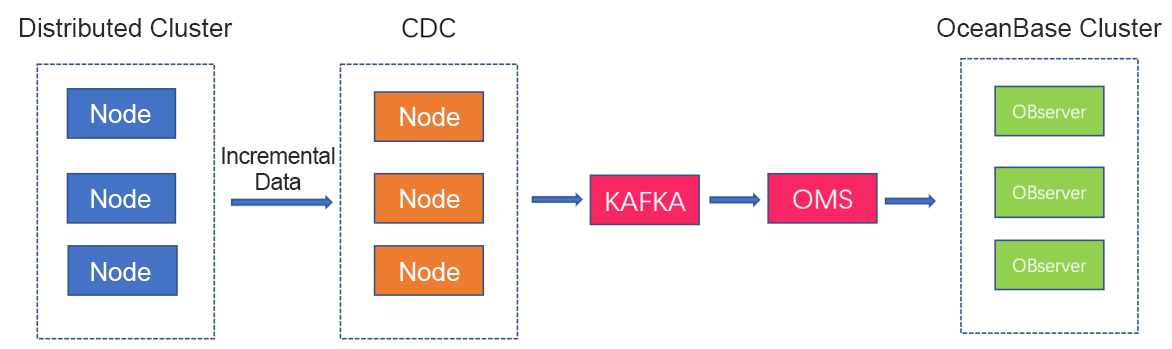
<style>
.page{position:relative;width:1172px;height:349px;background:#ffffff}
.page>*{position:absolute;margin:0}
.t1{font:26px "ArialMT";color:#272727}
.t2{font:26px "ArialMT";color:#ffffff}
.t3{font:23px/26px "ArialMT";letter-spacing:-0.02em;color:#272727}
</style>
<div class="page">
<p class="t1" style="left:20px;top:18px;width:213px;height:19px">Distributed Cluster</p>
<p class="t1" style="left:937px;top:18px;width:225px;height:19px">OceanBase Cluster</p>
<p class="t2" style="left:91px;top:104px;width:60px;height:19px">Node</p>
<p class="t2" style="left:400px;top:107px;width:60px;height:19px">Node</p>
<p class="t3" style="left:222px;top:147px;width:113px;height:43px;text-align:center">Incremental Data</p>
<p class="t2" style="left:91px;top:189px;width:60px;height:19px">Node</p>
<p class="t2" style="left:400px;top:189px;width:60px;height:19px">Node</p>
<p class="t2" style="left:91px;top:262px;width:60px;height:19px">Node</p>
<p class="t2" style="left:400px;top:262px;width:60px;height:19px">Node</p>
</div>
